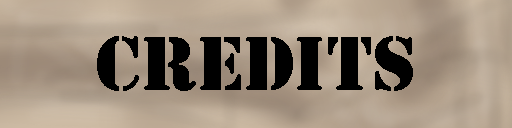
<style>
.page{position:relative;width:512px;height:128px}
.page>*{position:absolute;margin:0}
.t1{font:79.3px "Stencil";color:#000000}
</style>
<div class="page">
<p class="t1" style="left:97px;top:36px;width:316px;height:55px">Credits</p>
</div>
